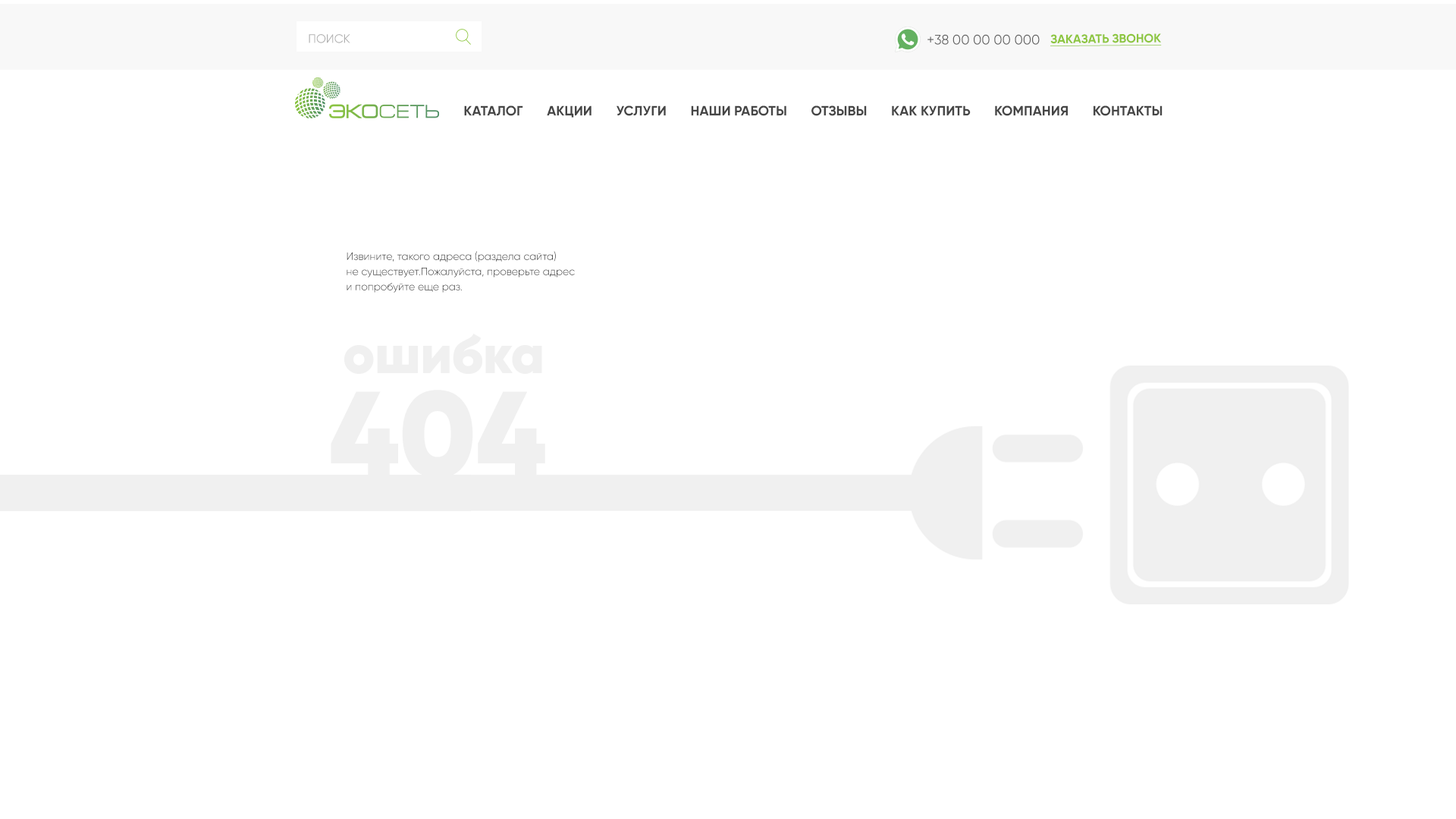
<style>
.page{position:relative;width:1456px;height:819px;background:#ffffff}
.page>*{position:absolute;margin:0}
.t1{font:12.1px "Gilroy-Regular";color:#b1b1b1;text-transform:uppercase}
.t2{font:13.6px "Gilroy-Regular";color:#636363;text-transform:uppercase}
.t3{font:12.1px "Gilroy-Bold";color:#8dc63f;text-transform:uppercase;text-decoration:underline}
.t4{font:13.6px "Gilroy-Bold";color:#464646;text-transform:uppercase}
.t5{font:10.6px/15.2px "Gilroy-Light";color:#292929}
.t6{font:54.6px/66.7px "Gilroy-Black";color:#f0f0f0}
.t7{font:120.6px/103.1px "Gilroy-Black";color:#f0f0f0}
</style>
<div class="page">
<p class="t1" style="left:309px;top:34px;width:41px;height:9px">поиск</p>
<p class="t2" style="left:927px;top:34px;width:113px;height:11px">+38 00 00 00 000</p>
<p class="t3" style="left:1050px;top:33px;width:112px;height:13px;rotate:-1deg">заказать звонок</p>
<p class="t4" style="left:464px;top:105px;width:699px;height:13px">Каталог       Акции       Услуги       Наши работы       отзывы       Как купить       Компания       Контакты</p>
<p class="t5" style="left:347px;top:251px;width:228px;height:42px">Извините, такого адреса (раздела сайта) <br>не существует.Пожалуйста, проверьте адрес <br>и попробуйте еще раз.</p>
<p class="t6" style="left:331px;top:334px;width:214px;height:145px;text-align:center">ошибка <br><span class="t7">404</span></p>
</div>
